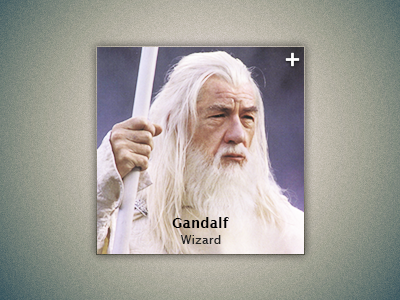
<style>
.page{position:relative;width:400px;height:300px}
.page>*{position:absolute;margin:0}
.t1{font:14px "LucidaSans-Demi";letter-spacing:0.01em;color:#000000}
.t2{font:12px "LucidaSansUnicode";letter-spacing:0.01em;color:#252525}
</style>
<div class="page">
<p class="t1" style="left:172px;top:217px;width:57px;height:11px">Gandalf</p>
<p class="t2" style="left:180px;top:235px;width:41px;height:9px">Wizard</p>
</div>
